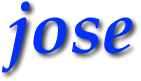
<style>
.page{position:relative;width:141px;height:81px;background:#ffffff}
.page>*{position:absolute;margin:0}
.t1{font:72px "PalatinoLinotype-BoldItalic";color:#0132f5}
</style>
<div class="page">
<p class="t1" style="left:1px;top:1px;width:132px;height:72px">jose</p>
</div>
